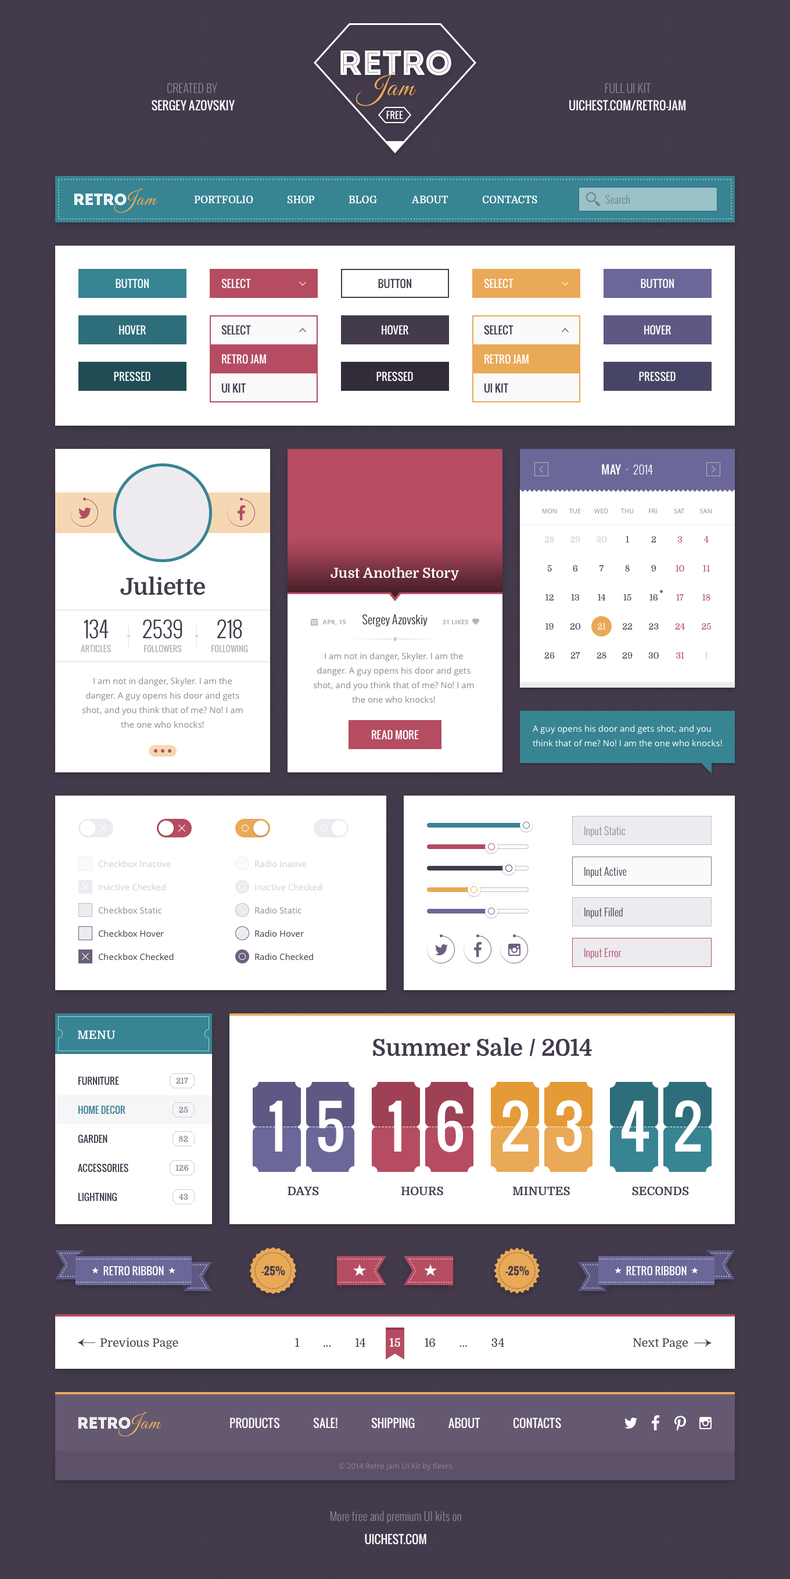
<style>
.page{position:relative;width:790px;height:1579px;background:#ffffff}
.page>*{position:absolute;margin:0}
.t1{font:11.6px "Oswald-Light";color:#8e8994;text-transform:uppercase}
.t2{font:11.6px "Oswald-Regular";color:#ffffff;text-transform:uppercase}
.t3{font:9.3px "Oswald-Regular";color:#ffffff;text-transform:uppercase}
.t4{font:9.9px "Domine-Bold";color:#ffffff;text-transform:uppercase}
.t5{font:10.5px "Oswald-Light";color:#6f7e8a}
.t6{font:10.5px "Oswald-Regular";color:#ffffff;text-transform:uppercase}
.t7{font:10.5px "Oswald-Regular";color:#433b4c;text-transform:uppercase}
.t8{font:10.5px/29px "Oswald-Regular";color:#ffffff;text-transform:uppercase}
.t9{font:10.5px/29px "Oswald-Regular";color:#433b4c;text-transform:uppercase}
.t10{font:11.6px "Oswald-Light";color:#ffffff;text-transform:uppercase}
.t11{font:6.4px "OpenSans";color:#8e8994;text-transform:uppercase}
.t12{font:8.7px "Domine-Regular";color:#d0ced2}
.t13{font:8.7px "Domine-Regular";color:#433b4c}
.t14{font:8.7px "Domine-Regular";color:#b54c62}
.t15{font:13.9px "Domine-Bold";color:#ffffff}
.t16{font:23.2px "Domine-Bold";color:#433b4c}
.t17{font:11.6px "Oswald-Light";color:#222222}
.t18{font:22.1px "Oswald-Light";color:#433b4c}
.t19{font:6.4px "OpenSans-Bold";color:#b4b1b7;text-transform:uppercase}
.t20{font:8.7px "Domine-Regular";color:#ffffff}
.t21{font:8.1px "Oswald-Regular";color:#b4b1b7;text-transform:uppercase}
.t22{font:8.7px/14.5px "OpenSans";color:#8e8994}
.t23{font:8.7px/14.5px "OpenSans";color:#ffffff}
.t24{font:10.5px "Oswald-Light";color:#8e8994}
.t25{font:8.7px "OpenSans";color:#d0ced2}
.t26{font:10.5px "Oswald-Light";color:#433b4c}
.t27{font:8.7px "OpenSans";color:#8e8994}
.t28{font:8.7px "OpenSans";color:#433b4c}
.t29{font:10.5px "Oswald-Light";color:#b54c62}
.t30{font:11.6px "Domine-Bold";color:#ffffff;text-transform:uppercase}
.t31{font:9.3px/29px "Oswald-Regular";color:#433b4c;text-transform:uppercase}
.t32{font:9.3px/29px "Oswald-Regular";color:#378493;text-transform:uppercase}
.t33{font:8.1px "Domine-Bold";color:#8e8994;text-transform:uppercase}
.t34{font:58.1px "Oswald-Regular";color:#ffffff;text-transform:uppercase}
.t35{font:11.6px "Domine-Bold";color:#433b4c;text-transform:uppercase}
.t36{font:10.5px "Oswald-Bold";color:#433b4c;text-transform:uppercase}
.t37{font:11.6px "Domine-Regular";color:#433b4c}
.t38{font:11.6px "Domine-Bold";color:#ffffff}
.t39{font:7.5px "OpenSans";color:#8d8696}
.t40{font:11.6px "Oswald-Light";color:#8e8994}
</style>
<div class="page">
<p class="t1" style="left:167px;top:83px;width:50px;height:10px">Created by</p>
<p class="t1" style="left:604px;top:83px;width:47px;height:10px">Full UI Kit</p>
<p class="t2" style="left:152px;top:100px;width:83px;height:11px">Sergey Azovskiy</p>
<p class="t2" style="left:569px;top:100px;width:117px;height:11px">UIChest.com/Retro-Jam</p>
<p class="t3" style="left:386px;top:111px;width:17px;height:8px">Free</p>
<p class="t4" style="left:194px;top:195px;width:59px;height:9px">Portfolio</p>
<p class="t4" style="left:287px;top:195px;width:28px;height:9px">Shop</p>
<p class="t4" style="left:348px;top:195px;width:29px;height:9px">Blog</p>
<p class="t4" style="left:411px;top:195px;width:37px;height:9px">About</p>
<p class="t4" style="left:482px;top:195px;width:55px;height:9px">Contacts</p>
<p class="t5" style="left:605px;top:195px;width:25px;height:9px">Search</p>
<p class="t6" style="left:116px;top:279px;width:33px;height:10px">Button</p>
<p class="t6" style="left:221px;top:279px;width:30px;height:10px">Select</p>
<p class="t7" style="left:378px;top:279px;width:33px;height:10px">Button</p>
<p class="t6" style="left:484px;top:279px;width:29px;height:10px">Select</p>
<p class="t6" style="left:640px;top:279px;width:34px;height:10px">Button</p>
<p class="t6" style="left:119px;top:325px;width:27px;height:10px">Hover</p>
<p class="t8" style="left:221px;top:325px;width:45px;height:68px"><span class="t9">Select<br></span>Retro Jam<br><span class="t9">UI Kit</span></p>
<p class="t6" style="left:381px;top:325px;width:27px;height:10px">Hover</p>
<p class="t8" style="left:484px;top:325px;width:44px;height:68px"><span class="t9">Select<br></span>Retro Jam<br><span class="t9">UI Kit</span></p>
<p class="t6" style="left:644px;top:325px;width:27px;height:10px">Hover</p>
<p class="t6" style="left:114px;top:372px;width:36px;height:9px">Pressed</p>
<p class="t6" style="left:376px;top:372px;width:37px;height:9px">Pressed</p>
<p class="t6" style="left:639px;top:372px;width:36px;height:9px">Pressed</p>
<p class="t2" style="left:602px;top:464px;width:19px;height:10px">May</p>
<p class="t10" style="left:633px;top:465px;width:20px;height:10px">2014</p>
<p class="t11" style="left:542px;top:508px;width:15px;height:6px">mon</p>
<p class="t11" style="left:568px;top:509px;width:13px;height:4px">tue</p>
<p class="t11" style="left:594px;top:509px;width:14px;height:4px">wed</p>
<p class="t11" style="left:620px;top:509px;width:13px;height:4px">thu</p>
<p class="t11" style="left:649px;top:509px;width:8px;height:4px">fri</p>
<p class="t11" style="left:674px;top:509px;width:11px;height:5px">sat</p>
<p class="t11" style="left:699px;top:508px;width:12px;height:6px">san</p>
<p class="t12" style="left:545px;top:536px;width:9px;height:7px">28</p>
<p class="t12" style="left:570px;top:536px;width:10px;height:7px">29</p>
<p class="t12" style="left:596px;top:536px;width:11px;height:7px">30</p>
<p class="t13" style="left:625px;top:536px;width:4px;height:6px">1</p>
<p class="t13" style="left:651px;top:536px;width:5px;height:6px">2</p>
<p class="t14" style="left:678px;top:536px;width:4px;height:7px">3</p>
<p class="t14" style="left:704px;top:536px;width:4px;height:6px">4</p>
<p class="t15" style="left:330px;top:567px;width:129px;height:14px">Just Another Story</p>
<p class="t13" style="left:547px;top:564px;width:5px;height:8px">5</p>
<p class="t13" style="left:573px;top:565px;width:4px;height:7px">6</p>
<p class="t13" style="left:599px;top:565px;width:5px;height:7px">7</p>
<p class="t13" style="left:625px;top:565px;width:4px;height:7px">8</p>
<p class="t13" style="left:651px;top:565px;width:5px;height:7px">9</p>
<p class="t14" style="left:675px;top:565px;width:9px;height:7px">10</p>
<p class="t14" style="left:703px;top:565px;width:7px;height:6px">11</p>
<p class="t16" style="left:120px;top:576px;width:85px;height:19px">Juliette</p>
<p class="t13" style="left:623px;top:593px;width:8px;height:8px">15</p>
<p class="t13" style="left:545px;top:594px;width:8px;height:6px">12</p>
<p class="t13" style="left:571px;top:594px;width:8px;height:7px">13</p>
<p class="t13" style="left:597px;top:594px;width:9px;height:6px">14</p>
<p class="t13" style="left:649px;top:594px;width:8px;height:7px">16</p>
<p class="t14" style="left:676px;top:594px;width:7px;height:7px">17</p>
<p class="t14" style="left:702px;top:594px;width:8px;height:7px">18</p>
<p class="t17" style="left:362px;top:614px;width:65px;height:13px">Sergey Azovskiy</p>
<p class="t18" style="left:84px;top:619px;width:25px;height:20px">134</p>
<p class="t18" style="left:143px;top:619px;width:39px;height:20px">2539</p>
<p class="t18" style="left:217px;top:619px;width:25px;height:20px">218</p>
<p class="t19" style="left:322px;top:620px;width:24px;height:5px">APR, 15</p>
<p class="t19" style="left:442px;top:620px;width:26px;height:5px">31 Likes</p>
<p class="t13" style="left:545px;top:623px;width:8px;height:7px">19</p>
<p class="t13" style="left:570px;top:623px;width:10px;height:7px">20</p>
<p class="t20" style="left:597px;top:623px;width:9px;height:6px">21</p>
<p class="t13" style="left:622px;top:623px;width:10px;height:6px">22</p>
<p class="t13" style="left:649px;top:623px;width:9px;height:7px">23</p>
<p class="t14" style="left:675px;top:623px;width:10px;height:6px">24</p>
<p class="t14" style="left:701px;top:622px;width:10px;height:8px">25</p>
<p class="t21" style="left:81px;top:645px;width:30px;height:8px">Articles</p>
<p class="t21" style="left:144px;top:645px;width:38px;height:8px">followers</p>
<p class="t21" style="left:211px;top:645px;width:37px;height:8px">following</p>
<p class="t22" style="left:313px;top:652px;width:161px;height:51px;text-align:center">I am not in danger, Skyler. I am the danger. A guy opens his door and gets shot, and you think that of me? No! I am the one who knocks!</p>
<p class="t13" style="left:544px;top:652px;width:11px;height:7px">26</p>
<p class="t13" style="left:570px;top:652px;width:10px;height:7px">27</p>
<p class="t13" style="left:596px;top:652px;width:10px;height:7px">28</p>
<p class="t13" style="left:622px;top:652px;width:10px;height:7px">29</p>
<p class="t13" style="left:648px;top:652px;width:10px;height:7px">30</p>
<p class="t14" style="left:676px;top:652px;width:8px;height:7px">31</p>
<p class="t12" style="left:704px;top:652px;width:4px;height:6px">1</p>
<p class="t22" style="left:82px;top:677px;width:161px;height:51px;text-align:center">I am not in danger, Skyler. I am the danger. A guy opens his door and gets shot, and you think that of me? No! I am the one who knocks!</p>
<p class="t23" style="left:532px;top:725px;width:190px;height:22px">A guy opens his door and gets shot, and you think that of me? No! I am the one who knocks!</p>
<p class="t6" style="left:372px;top:730px;width:47px;height:10px">Read More</p>
<p class="t24" style="left:584px;top:826px;width:41px;height:11px">Input Static</p>
<p class="t25" style="left:99px;top:860px;width:72px;height:7px">Checkbox Inactive</p>
<p class="t25" style="left:255px;top:860px;width:51px;height:7px">Radio Inative</p>
<p class="t26" style="left:584px;top:866px;width:42px;height:12px">Input Active</p>
<p class="t25" style="left:99px;top:883px;width:66px;height:8px">Inactive Checked</p>
<p class="t25" style="left:255px;top:883px;width:67px;height:8px">Inactive Checked</p>
<p class="t27" style="left:99px;top:906px;width:62px;height:8px">Checkbox Static</p>
<p class="t27" style="left:255px;top:906px;width:46px;height:8px">Radio Static</p>
<p class="t26" style="left:584px;top:907px;width:38px;height:12px">Input Filled</p>
<p class="t28" style="left:99px;top:930px;width:65px;height:7px">Checkbox Hover</p>
<p class="t28" style="left:255px;top:930px;width:49px;height:7px">Radio Hover</p>
<p class="t28" style="left:99px;top:953px;width:75px;height:7px">Checkbox Checked</p>
<p class="t28" style="left:255px;top:953px;width:58px;height:7px">Radio Checked</p>
<p class="t29" style="left:584px;top:948px;width:37px;height:11px">Input Error</p>
<p class="t30" style="left:77px;top:1030px;width:39px;height:9px">Menu</p>
<p class="t16" style="left:373px;top:1037px;width:219px;height:19px">Summer Sale / 2014</p>
<p class="t31" style="left:78px;top:1077px;width:50px;height:124px">Furniture<br><span class="t32">Home Decor<br></span>Garden<br>Accessories<br>Lightning</p>
<p class="t33" style="left:176px;top:1077px;width:12px;height:7px">217</p>
<p class="t33" style="left:179px;top:1106px;width:9px;height:7px">25</p>
<p class="t34" style="left:269px;top:1100px;width:13px;height:51px">1</p>
<p class="t34" style="left:318px;top:1100px;width:26px;height:52px">5</p>
<p class="t34" style="left:388px;top:1100px;width:13px;height:51px">1</p>
<p class="t34" style="left:437px;top:1100px;width:26px;height:52px">6</p>
<p class="t34" style="left:502px;top:1100px;width:26px;height:51px">2</p>
<p class="t34" style="left:556px;top:1100px;width:26px;height:52px">3</p>
<p class="t34" style="left:621px;top:1100px;width:28px;height:51px">4</p>
<p class="t34" style="left:675px;top:1100px;width:26px;height:51px">2</p>
<p class="t33" style="left:179px;top:1135px;width:9px;height:7px">82</p>
<p class="t33" style="left:175px;top:1164px;width:14px;height:7px">126</p>
<p class="t33" style="left:178px;top:1193px;width:10px;height:7px">43</p>
<p class="t35" style="left:287px;top:1186px;width:32px;height:10px">Days</p>
<p class="t35" style="left:401px;top:1186px;width:42px;height:10px">Hours</p>
<p class="t35" style="left:512px;top:1186px;width:58px;height:10px">Minutes</p>
<p class="t35" style="left:632px;top:1186px;width:57px;height:10px">Seconds</p>
<p class="t6" style="left:103px;top:1266px;width:61px;height:10px">Retro Ribbon</p>
<p class="t36" style="left:261px;top:1265px;width:24px;height:11px">-25%</p>
<p class="t36" style="left:505px;top:1265px;width:24px;height:11px">-25%</p>
<p class="t6" style="left:626px;top:1266px;width:60px;height:10px">Retro Ribbon</p>
<p class="t37" style="left:100px;top:1337px;width:78px;height:12px">Previous Page</p>
<p class="t37" style="left:295px;top:1338px;width:209px;height:9px">1  ...  14  <span class="t38">15</span>  16  ...  34</p>
<p class="t37" style="left:633px;top:1338px;width:54px;height:11px">Next Page</p>
<p class="t2" style="left:230px;top:1417px;width:50px;height:11px">Products</p>
<p class="t2" style="left:313px;top:1417px;width:24px;height:11px">Sale!</p>
<p class="t2" style="left:371px;top:1417px;width:44px;height:11px">Shipping</p>
<p class="t2" style="left:448px;top:1417px;width:32px;height:11px">About</p>
<p class="t2" style="left:513px;top:1417px;width:48px;height:11px">Contacts</p>
<p class="t39" style="left:339px;top:1463px;width:113px;height:8px">© 2014 Retro Jam UI Kit by flexrs</p>
<p class="t40" style="left:330px;top:1511px;width:131px;height:12px">More free and premium UI kits on</p>
<p class="t2" style="left:365px;top:1533px;width:61px;height:12px">UIChest.com</p>
</div>
